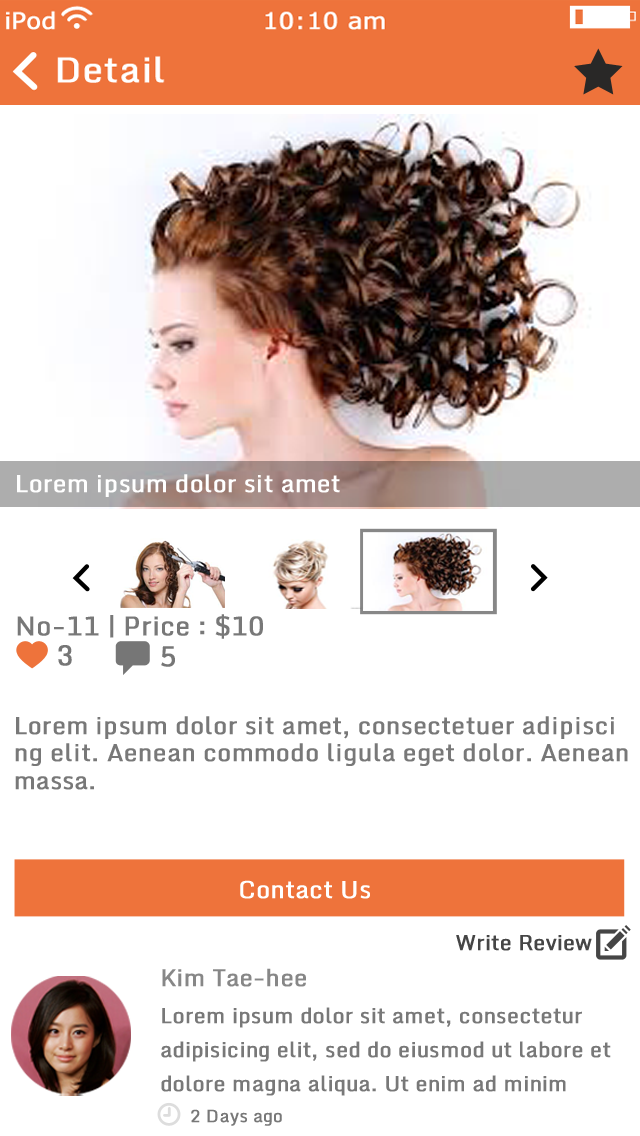
<style>
.page{position:relative;width:640px;height:1136px;background:#ffffff}
.page>*{position:absolute;margin:0}
.t1{font:24px "Monda-Regular";color:#ffffff;font-weight:bold}
.t2{font:26px "Monda-Regular";color:#787878;font-weight:bold}
.t3{font:28px "Monda-Regular";color:#767676;font-weight:bold}
.t4{font:24px/9.1px "Monda-Regular";color:#787878;font-weight:bold}
.t5{font:21.1px "Monda-Regular";color:#454545;font-weight:bold}
.t6{font:23.5px "Monda-Regular";color:#878787;font-weight:bold}
.t7{font:21.1px/11.3px "Monda-Regular";color:#787878;font-weight:bold}
.t8{font:17.3px "Monda-Regular";color:#787878;font-weight:bold}
</style>
<div class="page">
<p class="t1" style="left:17px;top:474px;width:323px;height:23px">Lorem ipsum dolor sit amet</p>
<p class="t2" style="left:17px;top:614px;width:246px;height:25px">No-11 | Price : $10</p>
<p class="t3" style="left:58px;top:645px;width:14px;height:21px">3</p>
<p class="t3" style="left:161px;top:646px;width:14px;height:21px">5</p>
<p class="t4" style="left:15px;top:716px;width:613px;height:74px">Lorem ipsum dolor sit amet, consectetuer adipisci<br><br><br>ng elit. Aenean commodo ligula eget dolor. Aenean<br><br><br>massa.</p>
<p class="t1" style="left:240px;top:880px;width:130px;height:19px">Contact Us</p>
<p class="t5" style="left:456px;top:935px;width:136px;height:16px">Write Review</p>
<p class="t6" style="left:162px;top:968px;width:144px;height:19px">Kim Tae-hee</p>
<p class="t7" style="left:161px;top:1007px;width:450px;height:89px">Lorem ipsum dolor sit amet, consectetur <br><br><br>adipisicing elit, sed do eiusmod ut labore et <br><br><br>dolore magna aliqua. Ut enim ad minim</p>
<p class="t8" style="left:191px;top:1109px;width:91px;height:17px">2 Days ago</p>
</div>
